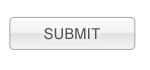
<style>
.page{position:relative;width:150px;height:70px;background:#ffffff}
.page>*{position:absolute;margin:0}
.t1{font:15px "ArialMT";color:#535353}
</style>
<div class="page">
<p class="t1" style="left:44px;top:28px;width:56px;height:12px">SUBMIT</p>
</div>
